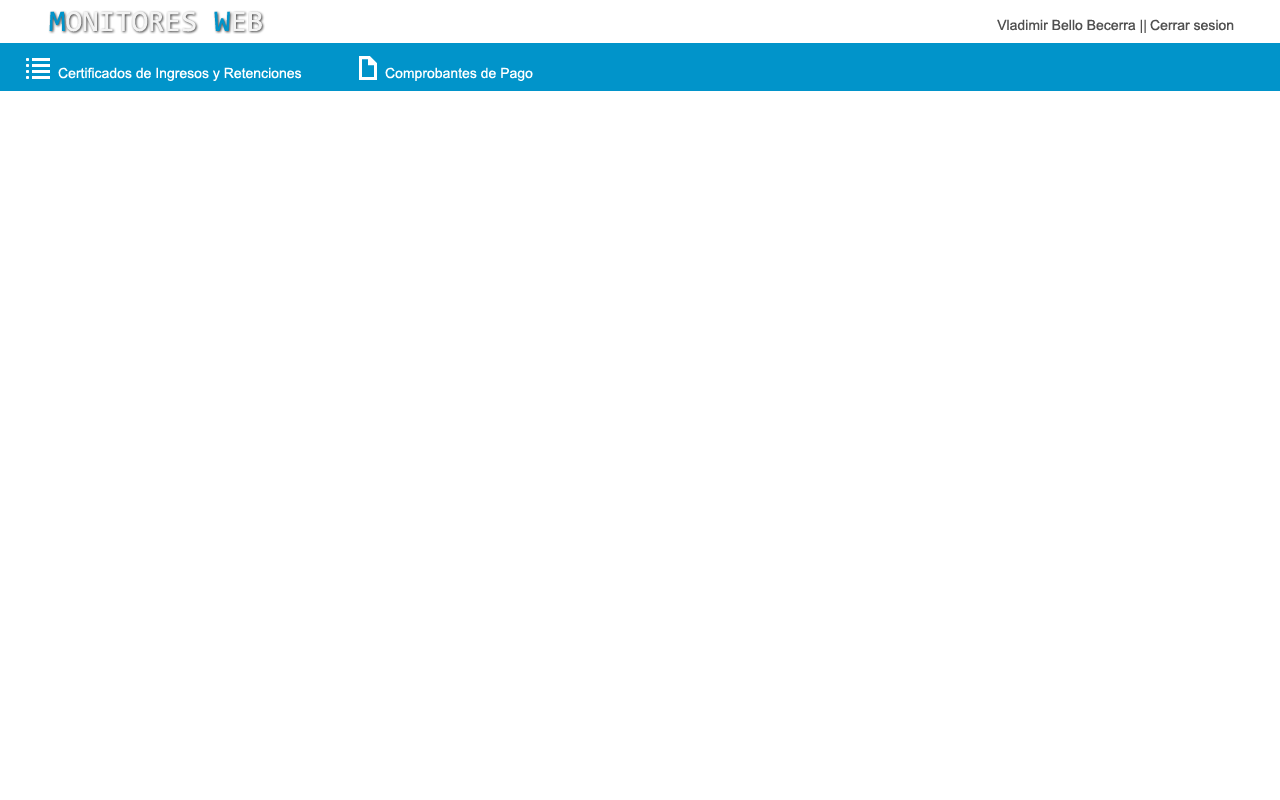
<style>
.page{position:relative;width:1280px;height:800px;background:#ffffff}
.page>*{position:absolute;margin:0}
.t1{font:14px "ArialMT";color:#505050}
.t2{font:14px "ArialMT";color:#ffffff}
</style>
<div class="page">
<p class="t1" style="left:997px;top:19px;width:149px;height:14px">Vladimir Bello Becerra ||</p>
<p class="t1" style="left:1150px;top:19px;width:84px;height:12px">Cerrar sesion</p>
<p class="t2" style="left:58px;top:67px;width:244px;height:14px">Certificados de Ingresos y Retenciones</p>
<p class="t2" style="left:385px;top:67px;width:148px;height:14px">Comprobantes de Pago</p>
</div>
